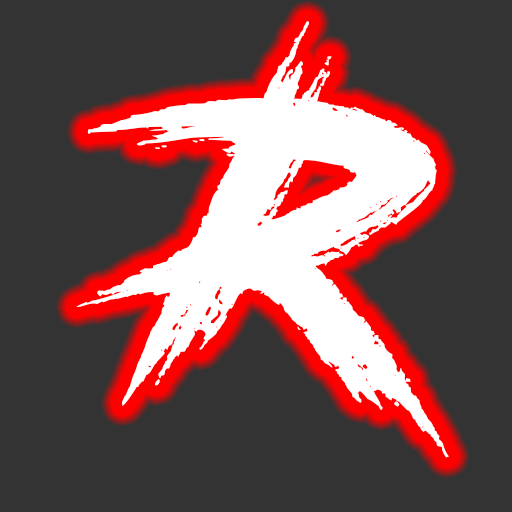
<style>
.page{position:relative;width:512px;height:512px;background:#333333}
.page>*{position:absolute;margin:0}
.t1{font:400px "RoadRage";color:#ffffff}
</style>
<div class="page">
<p class="t1" style="left:76px;top:21px;width:373px;height:437px">R</p>
</div>
